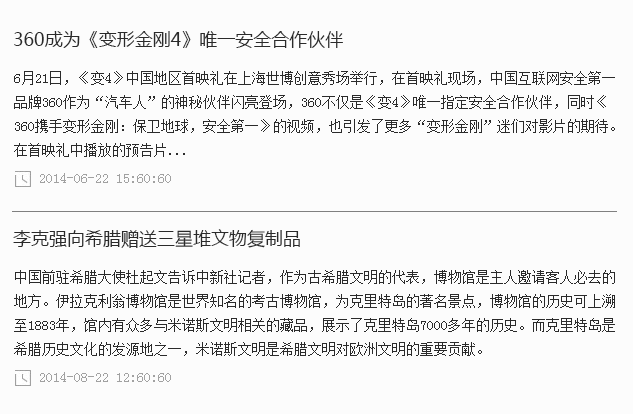
<style>
.page{position:relative;width:633px;height:414px;background:#fcfcfc}
.page>*{position:absolute;margin:0}
.t1{font:18px "MicrosoftYaHei";color:#2a2a2a}
.t2{font:14px/24px "SimSun";color:#2a2a2a}
.t3{font:14px "SimSun";color:#a1a1a1}
</style>
<div class="page">
<p class="t1" style="left:14px;top:31px;width:329px;height:17px">360成为《变形金刚4》唯一安全合作伙伴</p>
<p class="t2" style="left:14px;top:71px;width:601px;height:86px">6月21日，《变4》中国地区首映礼在上海世博创意秀场举行，在首映礼现场，中国互联网安全第一品牌360作为“汽车人”的神秘伙伴闪亮登场，360不仅是《变4》唯一指定安全合作伙伴，同时《360携手变形金刚：保卫地球，安全第一》的视频，也引发了更多“变形金刚”迷们对影片的期待。在首映礼中播放的预告片...</p>
<p class="t3" style="left:40px;top:173px;width:131px;height:10px">2014-06-22 15:60:60</p>
<p class="t1" style="left:13px;top:229px;width:287px;height:19px">李克强向希腊赠送三星堆文物复制品</p>
<p class="t2" style="left:14px;top:270px;width:601px;height:86px">中国前驻希腊大使杜起文告诉中新社记者，作为古希腊文明的代表，博物馆是主人邀请客人必去的地方。伊拉克利翁博物馆是世界知名的考古博物馆，为克里特岛的著名景点，博物馆的历史可上溯至1883年，馆内有众多与米诺斯文明相关的藏品，展示了克里特岛7000多年的历史。而克里特岛是希腊历史文化的发源地之一，米诺斯文明是希腊文明对欧洲文明的重要贡献。</p>
<p class="t3" style="left:40px;top:372px;width:131px;height:10px">2014-08-22 12:60:60</p>
</div>
